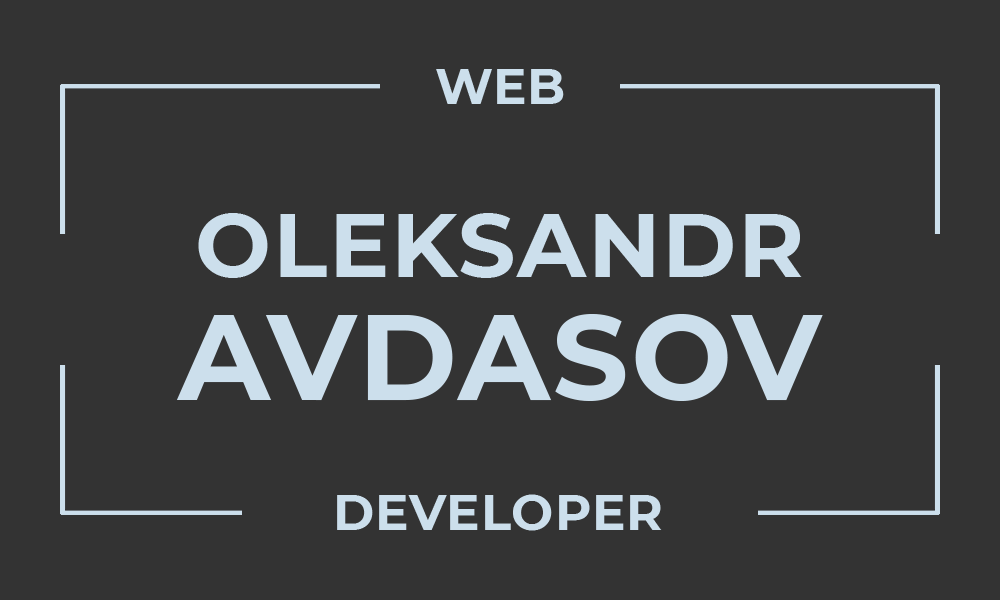
<style>
.page{position:relative;width:1000px;height:600px;background:#333333}
.page>*{position:absolute;margin:0}
.t1{font:50px "Montserrat-Bold";letter-spacing:0.02em;color:#ccdfec}
.t2{font:90px "Montserrat-Bold";letter-spacing:0.02em;color:#ccdfec}
.t3{font:120px "Montserrat-Bold";letter-spacing:0.02em;color:#ccdfec}
</style>
<div class="page">
<p class="t1" style="left:436px;top:69px;width:128px;height:35px">WEB</p>
<p class="t2" style="left:198px;top:213px;width:604px;height:65px">OLEKSANDR</p>
<p class="t3" style="left:176px;top:314px;width:647px;height:87px">AVDASOV</p>
<p class="t1" style="left:337px;top:494px;width:325px;height:37px">DEVELOPER</p>
</div>
